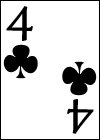
<style>
.page{position:relative;width:100px;height:140px;background:#ffffff}
.page>*{position:absolute;margin:0}
.t1{font:60px "HighTowerText-Reg";color:#000000}
</style>
<div class="page">
<p class="t1" style="left:6px;top:6px;width:27px;height:35px">4</p>
<p class="t1" style="left:67px;top:99px;width:27px;height:35px;rotate:180deg">4</p>
</div>
